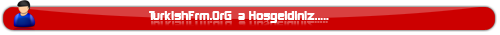
<style>
.page{position:relative;width:500px;height:35px;background:#cc0000}
.page>*{position:absolute;margin:0}
.t1{font:12px "TRKimberley";color:#ffffff}
</style>
<div class="page">
<p class="t1" style="left:149px;top:11px;width:180px;height:12px">TurkishFrm.OrG ‘a Hosgeldiniz.....</p>
</div>
